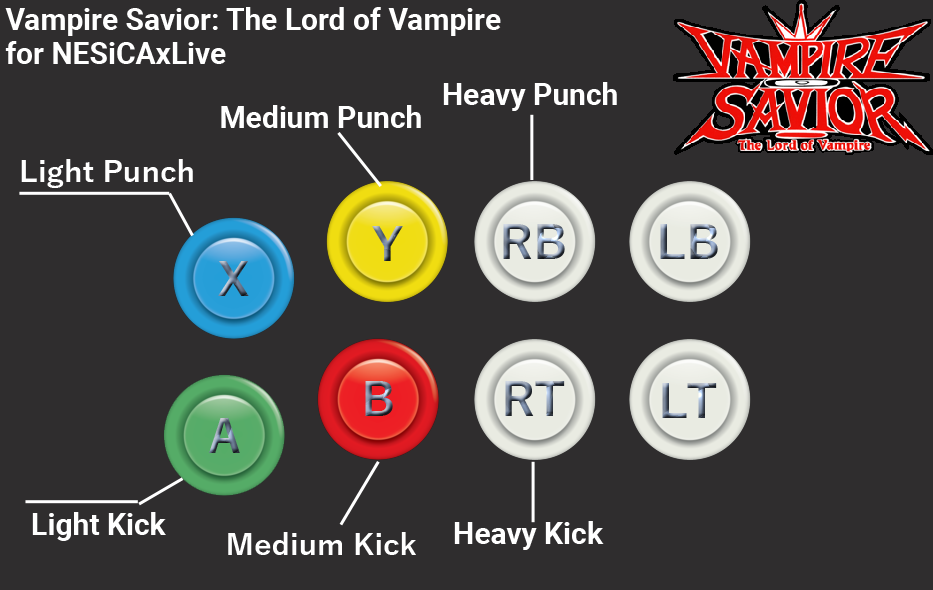
<style>
.page{position:relative;width:933px;height:590px;background:#2f2d2e}
.page>*{position:absolute;margin:0}
.t1{font:30px/34px "Roboto-Bold";color:#ffffff}
.t2{font:30px "Roboto-Bold";color:#ffffff}
.t3{font:30px "YuGothic-Bold";color:#ffffff}
</style>
<div class="page">
<p class="t1" style="left:5px;top:7px;width:496px;height:57px">Vampire Savior: The Lord of Vampire <br>for NESiCAxLive</p>
<p class="t2" style="left:443px;top:82px;width:174px;height:29px">Heavy Punch</p>
<p class="t2" style="left:221px;top:105px;width:200px;height:23px">Medium Punch</p>
<p class="t3" style="left:21px;top:159px;width:172px;height:29px">Light Punch</p>
<p class="t2" style="left:32px;top:512px;width:134px;height:29px">Light Kick</p>
<p class="t2" style="left:454px;top:521px;width:150px;height:29px">Heavy Kick</p>
<p class="t3" style="left:228px;top:532px;width:188px;height:23px">Medium Kick</p>
</div>
